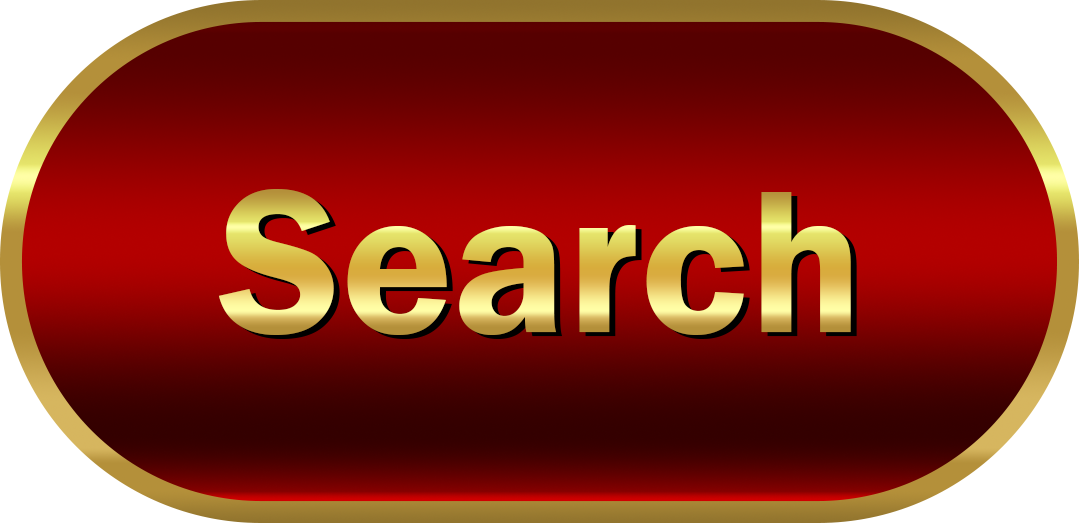
<style>
.page{position:relative;width:1080px;height:523px}
.page>*{position:absolute;margin:0}
.t1{font:210px "FranklinGothic-Demi"}
</style>
<div class="page">
<p class="t1" style="left:218px;top:189px;width:633px;height:146px">Search</p>
</div>
